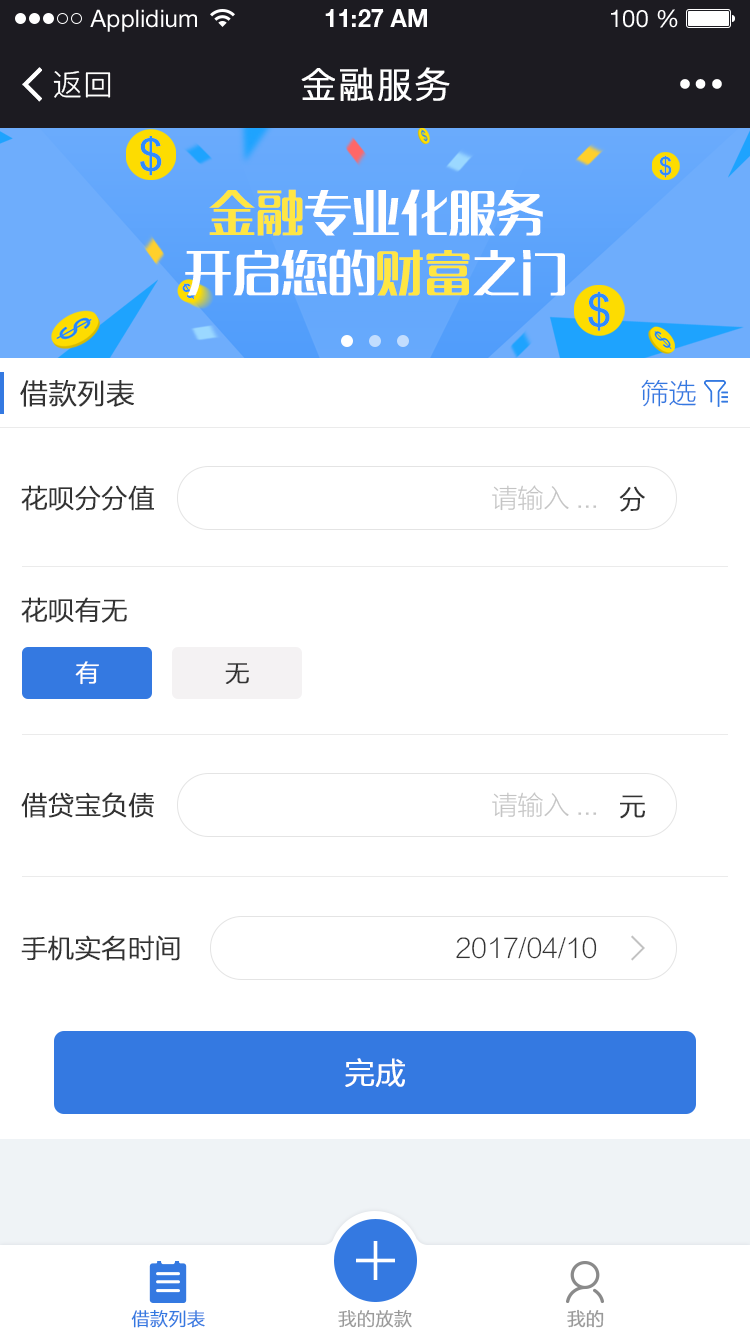
<style>
.page{position:relative;width:750px;height:1334px;background:#ffffff}
.page>*{position:absolute;margin:0}
.t1{font:24px "HelveticaNeueLTStd-Roman";color:#ffffff}
.t2{font:24px "HelveticaNeueLTStd-Bd";color:#ffffff}
.t3{font:30px "PingFang-SC-Regular";letter-spacing:0.025em;color:#ffffff}
.t4{font:36px "PingFang-SC-Regular";letter-spacing:0.025em;color:#ffffff;font-weight:bold}
.t5{font:48px/60px "MFLangQian_Noncommercial-Regular";color:#ffffff}
.t6{font:48px/60px "MFLangQian_Noncommercial-Regular";color:#ffe643}
.t7{font:28px "FZLTXHK--GBK1-0";color:#333333;font-weight:bold}
.t8{font:28px "FZLTXHK--GBK1-0";color:#3479e1}
.t9{font:26px "FZLTXHK--GBK1-0";color:#333333;font-weight:bold}
.t10{font:26px "FZLTXHK--GBK1-0";color:#c4c4c4}
.t11{font:24px "FZLTXHK--GBK1-0";color:#ffffff;font-weight:bold}
.t12{font:24px "FZLTXHK--GBK1-0";color:#333333;font-weight:bold}
.t13{font:26px "FZLTXHK--GBK1-0";color:#333333}
.t14{font:30px "FZLTXHK--GBK1-0";color:#ffffff;font-weight:bold}
.t15{font:18px "FZLTXHK--GBK1-0";color:#3479e1;font-weight:bold}
.t16{font:18px "FZLTXHK--GBK1-0";color:#999999;font-weight:bold}
</style>
<div class="page">
<p class="t1" style="left:90px;top:9px;width:107px;height:23px">Applidium</p>
<p class="t2" style="left:325px;top:9px;width:102px;height:18px">11:27 AM</p>
<p class="t1" style="left:611px;top:9px;width:67px;height:19px">100 %</p>
<p class="t3" style="left:53px;top:71px;width:58px;height:27px">返回</p>
<p class="t4" style="left:301px;top:67px;width:149px;height:34px">金融服务</p>
<p class="t5" style="left:185px;top:189px;width:380px;height:107px;text-align:center"><span class="t6">金融</span>专业化服务<br>开启您的<span class="t6">财富</span>之门</p>
<p class="t7" style="left:20px;top:380px;width:114px;height:27px">借款列表</p>
<p class="t8" style="left:641px;top:379px;width:55px;height:28px">筛选</p>
<p class="t9" style="left:21px;top:485px;width:133px;height:26px">花呗分分值</p>
<p class="t10" style="left:492px;top:485px;width:105px;height:26px">请输入...</p>
<p class="t9" style="left:619px;top:486px;width:26px;height:26px">分</p>
<p class="t9" style="left:21px;top:597px;width:106px;height:26px">花呗有无</p>
<p class="t11" style="left:75px;top:661px;width:24px;height:24px">有</p>
<p class="t12" style="left:225px;top:663px;width:24px;height:21px">无</p>
<p class="t9" style="left:21px;top:792px;width:133px;height:26px">借贷宝负债</p>
<p class="t10" style="left:492px;top:792px;width:105px;height:26px">请输入...</p>
<p class="t9" style="left:620px;top:795px;width:25px;height:24px">元</p>
<p class="t9" style="left:21px;top:935px;width:159px;height:26px">手机实名时间</p>
<p class="t13" style="left:456px;top:937px;width:141px;height:22px">2017/04/10</p>
<p class="t14" style="left:345px;top:1058px;width:60px;height:29px">完成</p>
<p class="t15" style="left:131px;top:1309px;width:74px;height:19px">借款列表</p>
<p class="t16" style="left:338px;top:1309px;width:74px;height:19px">我的放款</p>
<p class="t16" style="left:567px;top:1309px;width:37px;height:19px">我的</p>
</div>
